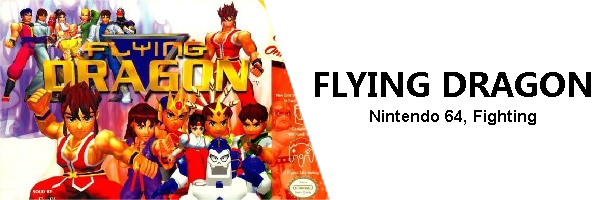
<style>
.page{position:relative;width:600px;height:200px;background:#ffffff}
.page>*{position:absolute;margin:0}
.t1{font:16.7px/25px "Arial-BoldMT";color:#000000}
.t2{font:33.3px/25px "MicrosoftYaHei-Bold";color:#000000}
</style>
<div class="page">
<p class="t1" style="left:315px;top:72px;width:276px;height:53px;text-align:center"><span class="t2">FLYING DRAGON<br></span>Nintendo 64, Fighting</p>
</div>
